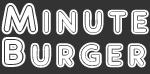
<style>
.page{position:relative;width:150px;height:74px;background:#333333}
.page>*{position:absolute;margin:0}
.t1{font:45.3px "ARDELANEY";letter-spacing:0.025em;color:#ffffff;font-weight:bold}
.t2{font:44.2px "ARDELANEY";letter-spacing:0.025em;color:#ffffff;font-weight:bold}
</style>
<div class="page">
<p class="t1" style="left:1px;top:3px;width:148px;height:32px">Minute</p>
<p class="t2" style="left:2px;top:37px;width:145px;height:31px">Burger</p>
</div>
